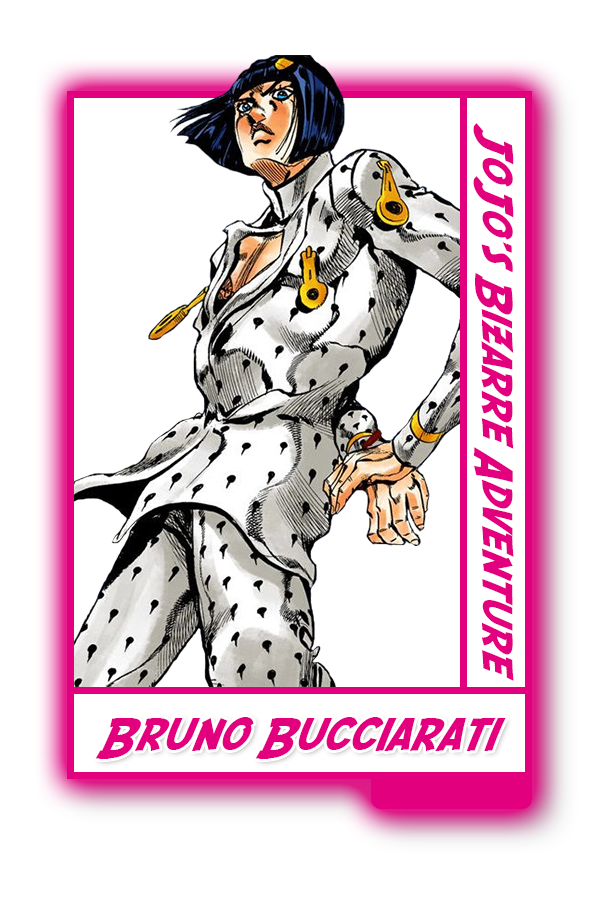
<style>
.page{position:relative;width:600px;height:900px;background:#ffffff}
.page>*{position:absolute;margin:0}
.t1{font:42.4px "SFFedora";color:#e3007e}
.t2{font:45.6px "SFFedora";color:#e3007e}
</style>
<div class="page">
<p class="t1" style="left:473px;top:123px;width:41px;height:558px;rotate:90deg">JoJo's Bizarre Adventure</p>
<p class="t2" style="left:95px;top:717px;width:411px;height:42px">Bruno Bucciarati</p>
</div>
